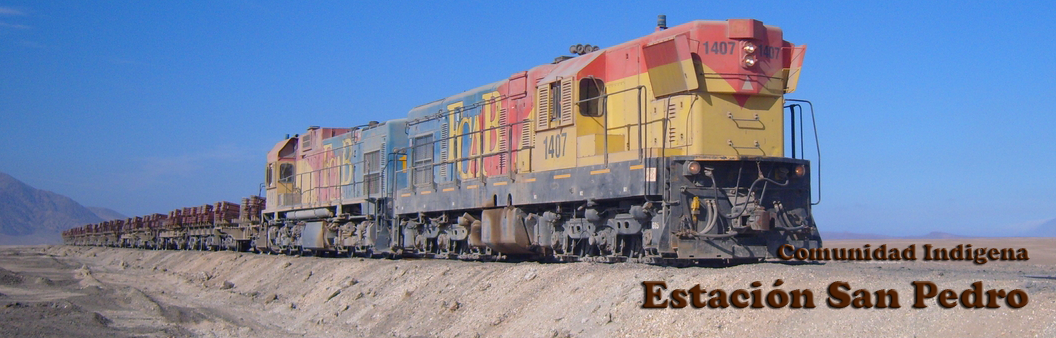
<style>
.page{position:relative;width:1056px;height:338px}
.page>*{position:absolute;margin:0}
.t1{font:24px "CooperBlack"}
.t2{font:40px "CooperBlack"}
</style>
<div class="page">
<p class="t1" style="left:642px;top:244px;width:389px;height:64px;text-align:right">Comunidad Indigena<br><span class="t2">Estación San Pedro</span></p>
</div>
